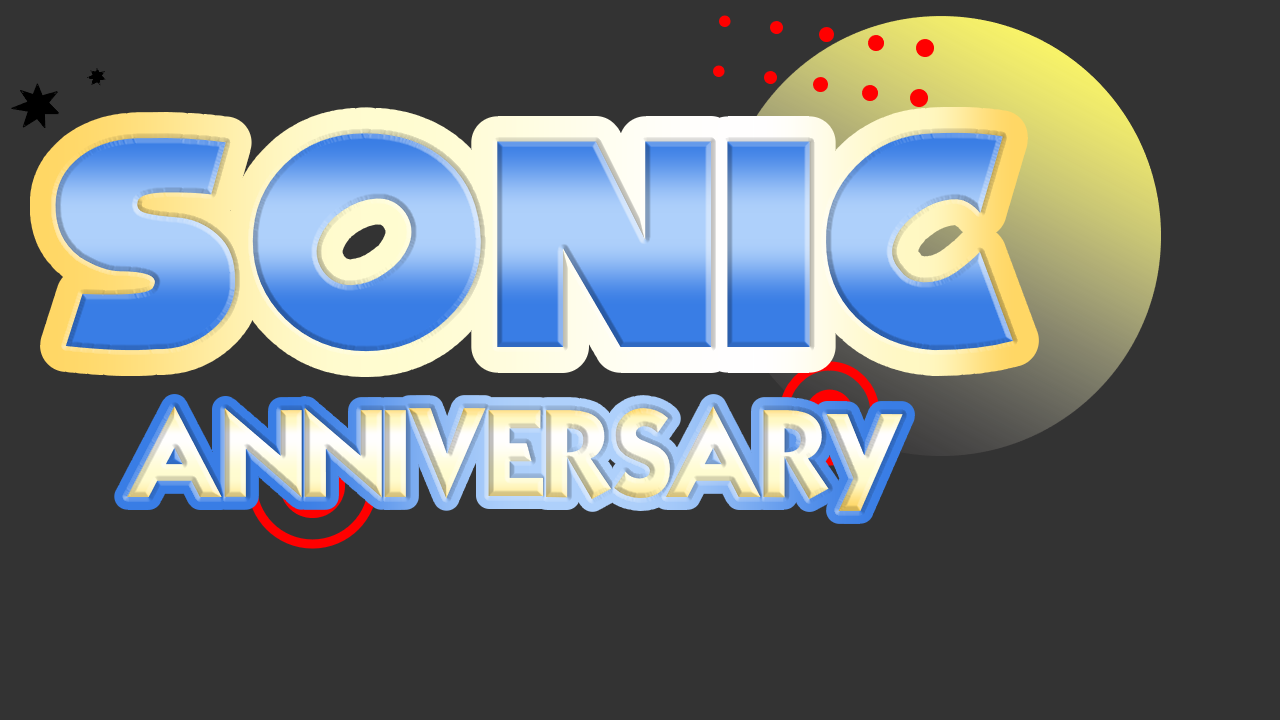
<style>
.page{position:relative;width:1280px;height:720px;background:#333333}
.page>*{position:absolute;margin:0}
.t1{font:263px "NiseSegaSonic"}
.t2{font:124px "Mouser"}
.t3{font:134px "Mouser"}
</style>
<div class="page">
<p class="t1" style="left:55px;top:131px;width:958px;height:222px">SONIC</p>
<p class="t2" style="left:127px;top:406px;width:776px;height:105px">ANNIVERSAR<span class="t3">y</span></p>
</div>
